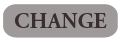
<style>
.page{position:relative;width:120px;height:45px;background:#9e9a9a}
.page>*{position:absolute;margin:0}
.t1{font:22px "AGaramondPro-Bold";color:#3a2e2e}
</style>
<div class="page">
<p class="t1" style="left:15px;top:13px;width:92px;height:15px">CHANGE</p>
</div>
